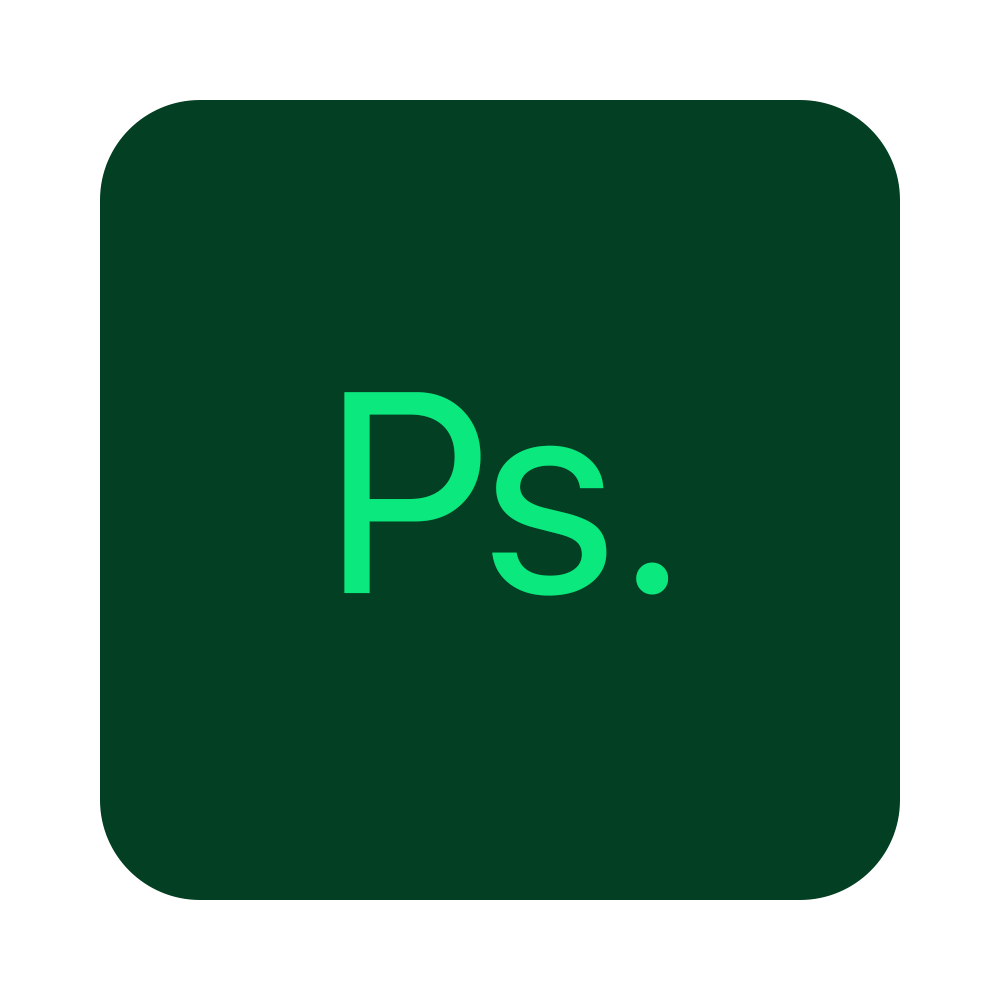
<style>
.page{position:relative;width:1000px;height:1000px;background:#033f22}
.page>*{position:absolute;margin:0}
.t1{font:285.4px "SFProDisplay-Regular";color:#0be97e}
</style>
<div class="page">
<p class="t1" style="left:344px;top:392px;width:325px;height:204px">Ps.</p>
</div>
